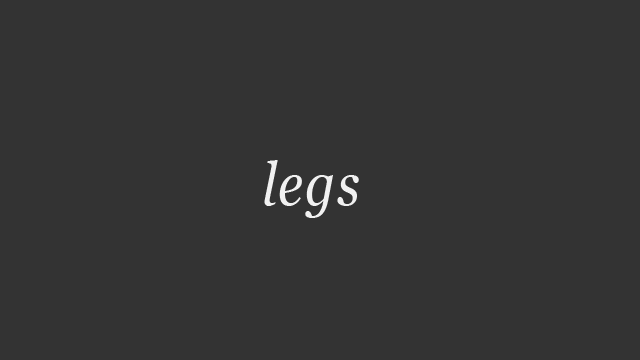
<style>
.page{position:relative;width:640px;height:360px;background:#333333}
.page>*{position:absolute;margin:0}
.t1{font:60px "Georgia-Italic";letter-spacing:0.025em;color:#f1f1f1;scale:0.89 1}
</style>
<div class="page">
<p class="t1" style="left:264px;top:160px;width:95px;height:58px">legs</p>
</div>
